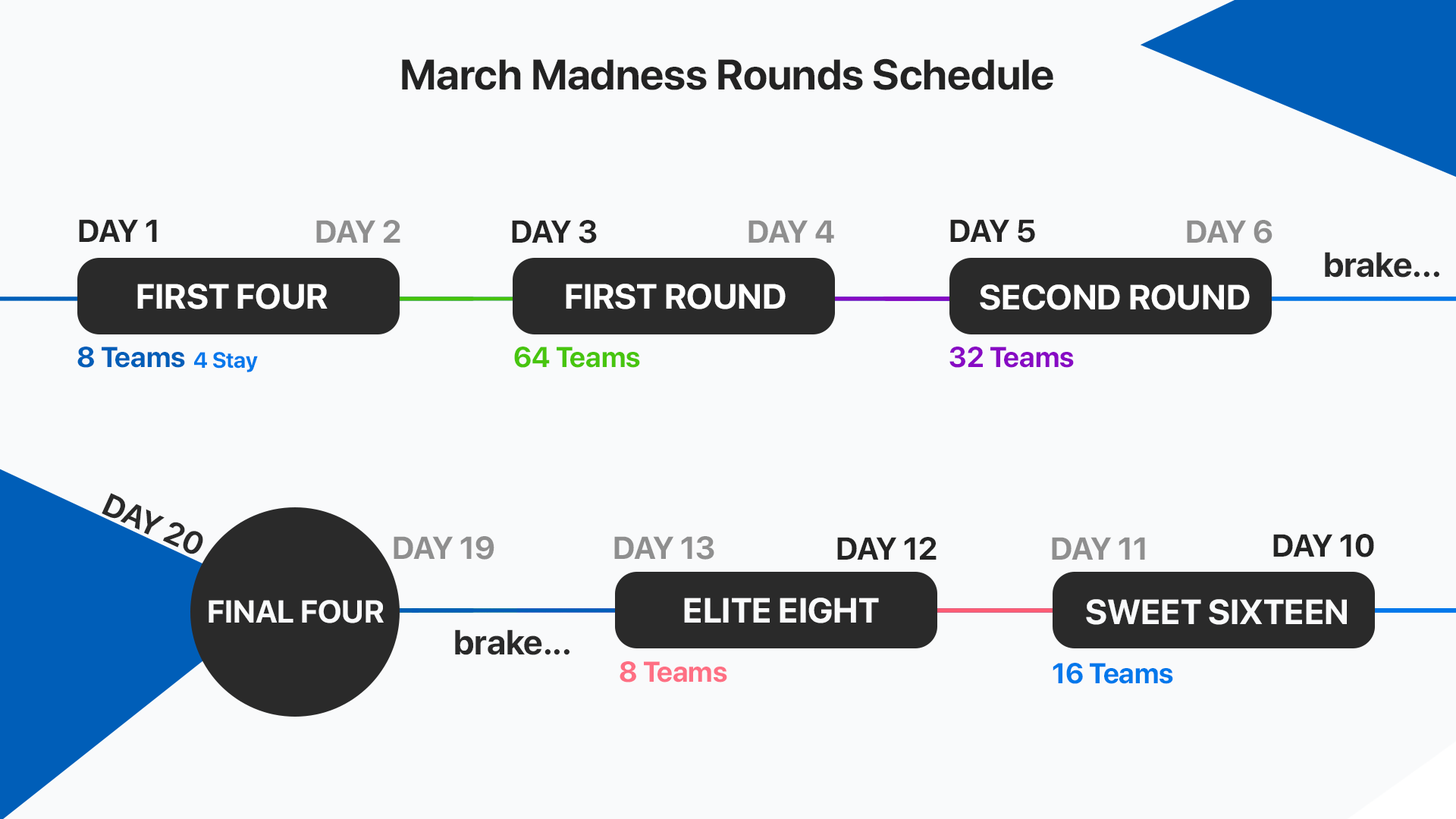
<style>
.page{position:relative;width:1456px;height:819px;background:#f9fafb}
.page>*{position:absolute;margin:0}
.t1{font:42.6px "SFProDisplay-Bold";color:#232323}
.t2{font:31.6px "SFProDisplay-Bold";color:#242424}
.t3{font:31.6px "SFProDisplay-Bold";color:#8f8f8f}
.t4{font:34.8px "SFProDisplay-Bold";color:#2a2a2a}
.t5{font:34.8px "SFProDisplay-Bold";color:#ffffff}
.t6{font:28.4px "SFProDisplay-Bold";color:#005eb8}
.t7{font:22.1px "SFProDisplay-Bold";color:#0078eb}
.t8{font:28.4px "SFProDisplay-Bold";color:#48c50e}
.t9{font:28.4px "SFProDisplay-Bold";color:#880ac4}
.t10{font:31.6px "SFProDisplay-Bold";color:#2a2a2a}
.t11{font:31.6px "SFProDisplay-Bold";color:#f9fafb}
.t12{font:34.8px "SFProDisplay-Bold";color:#f9fafb}
.t13{font:28.4px "SFProDisplay-Bold";color:#fe6f83}
.t14{font:28.4px "SFProDisplay-Bold";color:#0078eb}
</style>
<div class="page">
<p class="t1" style="left:402px;top:58px;width:651px;height:32px">March Madness Rounds Schedule</p>
<p class="t2" style="left:79px;top:219px;width:78px;height:23px">DAY 1</p>
<p class="t3" style="left:316px;top:220px;width:84px;height:23px">DAY 2</p>
<p class="t2" style="left:512px;top:220px;width:85px;height:23px">DAY 3</p>
<p class="t3" style="left:748px;top:220px;width:86px;height:23px">DAY 4</p>
<p class="t2" style="left:950px;top:219px;width:85px;height:24px">DAY 5</p>
<p class="t3" style="left:1187px;top:220px;width:85px;height:23px">DAY 6</p>
<p class="t4" style="left:1325px;top:252px;width:114px;height:26px">brake...</p>
<p class="t5" style="left:137px;top:284px;width:191px;height:25px">FIRST FOUR</p>
<p class="t5" style="left:566px;top:284px;width:220px;height:25px">FIRST ROUND</p>
<p class="t5" style="left:980px;top:284px;width:270px;height:26px">SECOND ROUND</p>
<p class="t6" style="left:77px;top:347px;width:108px;height:21px">8 Teams</p>
<p class="t7" style="left:194px;top:352px;width:64px;height:20px">4 Stay</p>
<p class="t8" style="left:514px;top:347px;width:126px;height:21px">64 Teams</p>
<p class="t9" style="left:949px;top:347px;width:125px;height:21px">32 Teams</p>
<p class="t10" style="left:102px;top:493px;width:101px;height:61px;rotate:24deg">DAY 20</p>
<p class="t2" style="left:1273px;top:534px;width:101px;height:23px">DAY 10</p>
<p class="t3" style="left:394px;top:536px;width:100px;height:24px">DAY 19</p>
<p class="t3" style="left:614px;top:536px;width:100px;height:24px">DAY 13</p>
<p class="t2" style="left:837px;top:537px;width:100px;height:23px">DAY 12</p>
<p class="t3" style="left:1052px;top:537px;width:93px;height:23px">DAY 11</p>
<p class="t11" style="left:209px;top:600px;width:175px;height:23px">FINAL FOUR</p>
<p class="t12" style="left:684px;top:598px;width:195px;height:25px">ELITE EIGHT</p>
<p class="t12" style="left:1086px;top:599px;width:261px;height:26px">SWEET SIXTEEN</p>
<p class="t4" style="left:455px;top:629px;width:115px;height:26px">brake...</p>
<p class="t13" style="left:620px;top:661px;width:107px;height:21px">8 Teams</p>
<p class="t14" style="left:1053px;top:663px;width:120px;height:21px">16 Teams</p>
</div>
